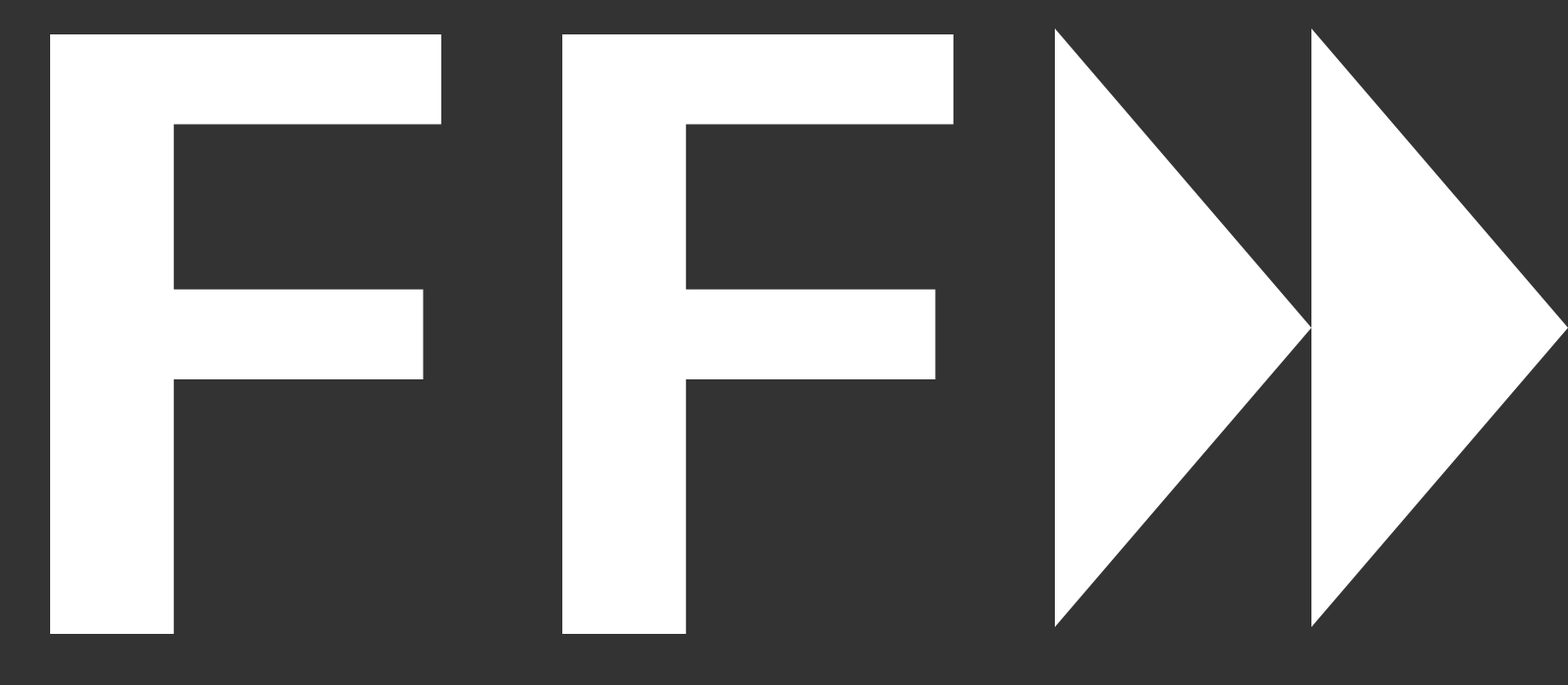
<style>
.page{position:relative;width:1568px;height:685px;background:#333333}
.page>*{position:absolute;margin:0}
.t1{font:889.9px "MyriadPro-Semibold";color:#ffffff;scale:1.13 1}
</style>
<div class="page">
<p class="t1" style="left:50px;top:34px;width:904px;height:600px">FF</p>
</div>
